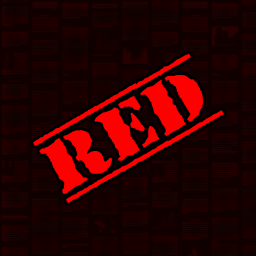
<style>
.page{position:relative;width:256px;height:256px;background:#100000}
.page>*{position:absolute;margin:0}
.t1{font:73.8px "TopSecret";color:#ff0000;scale:1.22 1}
</style>
<div class="page">
<p class="t1" style="left:33px;top:53px;width:191px;height:150px;rotate:-30deg">RED</p>
</div>
